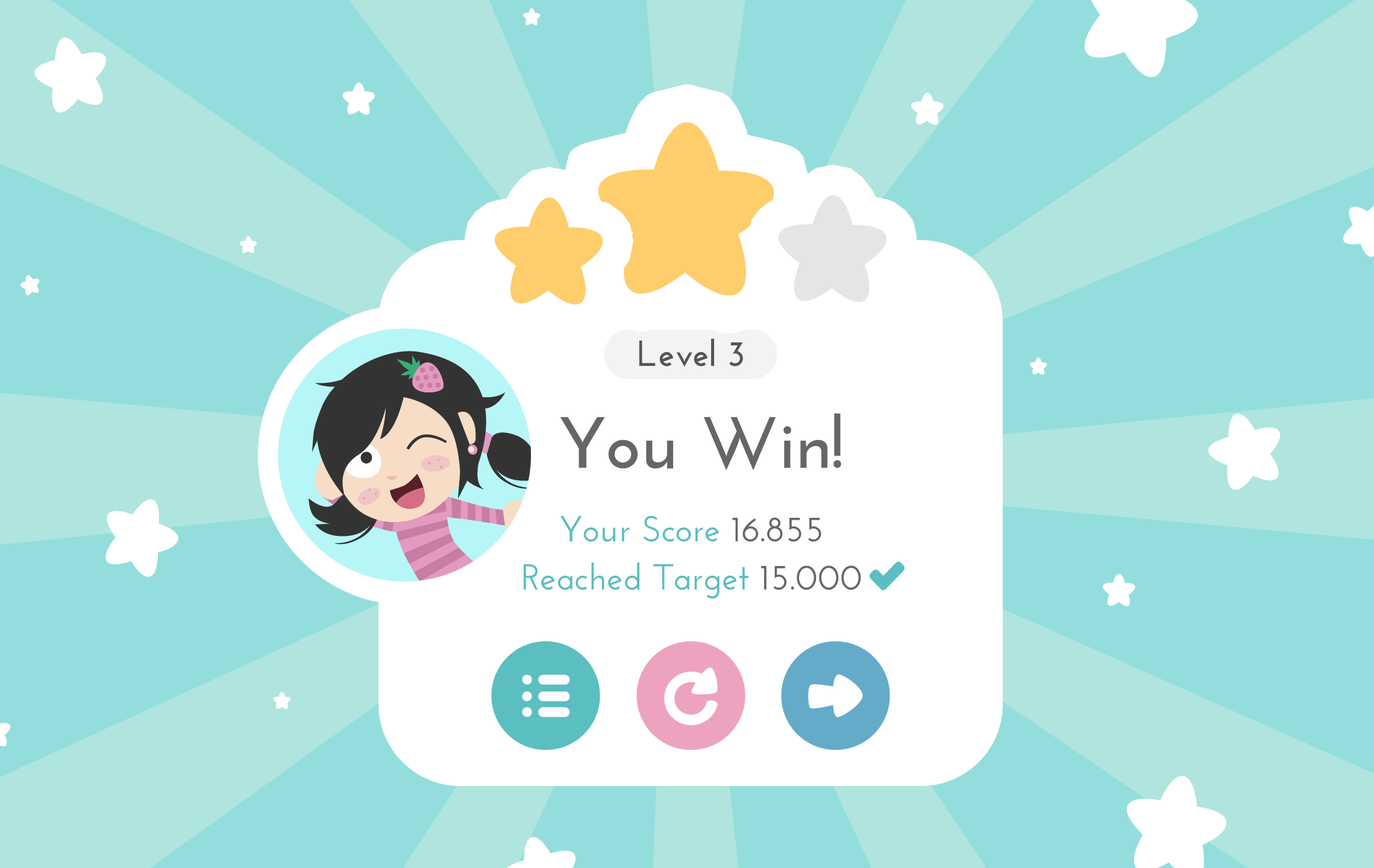
<style>
.page{position:relative;width:1374px;height:868px;background:#93dedd}
.page>*{position:absolute;margin:0}
.t1{font:36.2px "JosefinSans-Bold";color:#555555}
.t2{font:72.3px "JosefinSans-Bold";color:#666666}
.t3{font:36.2px "JosefinSans-SemiBold";color:#59bebf}
.t4{font:36.2px "JosefinSans-SemiBold";color:#666666}
</style>
<div class="page">
<p class="t1" style="left:639px;top:339px;width:104px;height:28px">Level 3</p>
<p class="t2" style="left:560px;top:413px;width:281px;height:57px">You Win!</p>
<p class="t3" style="left:560px;top:515px;width:261px;height:27px">Your Score<span class="t4"> 16.855</span></p>
<p class="t3" style="left:524px;top:562px;width:337px;height:36px">Reached Target<span class="t4"> 15.000</span></p>
</div>
